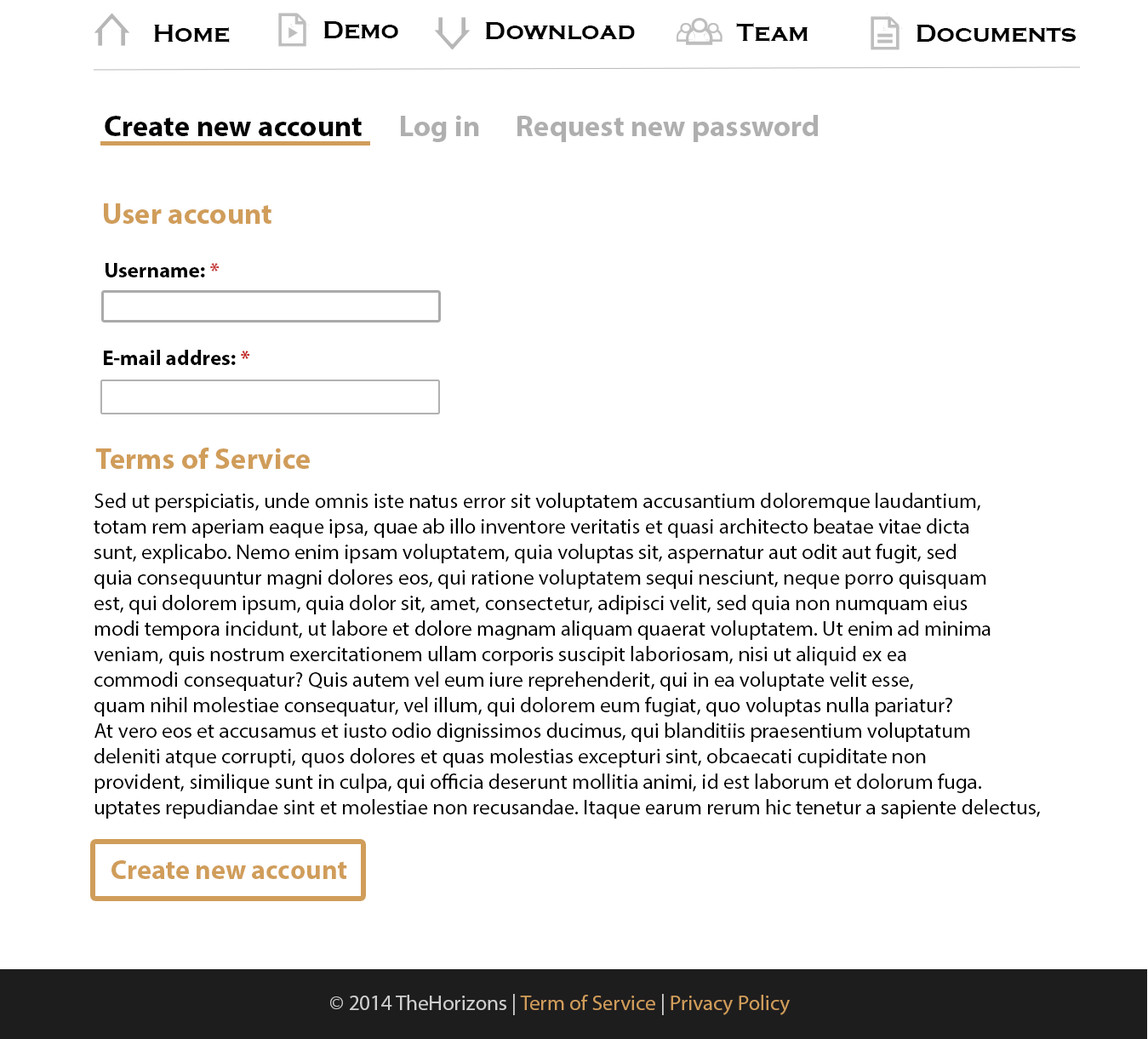
<style>
.page{position:relative;width:1148px;height:1039px;background:#ffffff}
.page>*{position:absolute;margin:0}
.t1{font:25.5px "CopperplateGothic-Bold";color:#000000}
.t2{font:29.8px "MyriadPro-Bold";color:#afafaf}
.t3{font:21.3px "MyriadPro-Regular";color:#000000}
.t4{font:29.8px "MyriadPro-Bold";color:#000000}
.t5{font:29.8px "MyriadPro-Bold";color:#d09d5a}
.t6{font:21.3px "MyriadPro-Bold";color:#000000}
.t7{font:21.3px "MyriadPro-Bold";color:#c83939}
.t8{font:21.3px "MyriadPro-Bold";color:#c32323}
.t9{font:27.2px "MyriadPro-Bold";color:#d09d5a}
.t10{font:21.3px "MyriadPro-Regular";color:#cecece}
.t11{font:21.3px "MyriadPro-Regular";color:#d09d5a}
</style>
<div class="page">
<p class="t1" style="left:154px;top:25px;width:76px;height:18px">Home</p>
<p class="t1" style="left:323px;top:21px;width:75px;height:18px">Demo</p>
<p class="t1" style="left:485px;top:22px;width:150px;height:18px">Download</p>
<p class="t1" style="left:736px;top:23px;width:72px;height:19px">Team</p>
<p class="t1" style="left:916px;top:25px;width:159px;height:18px">Documents</p>
<p class="t2" style="left:105px;top:115px;width:713px;height:27px"><span class="t3"><br>    </span><span class="t4">Create new account      </span>Log in      Request new password</p>
<p class="t5" style="left:104px;top:203px;width:167px;height:21px">User account</p>
<p class="t6" style="left:106px;top:263px;width:113px;height:14px">Username: <span class="t7">*</span></p>
<p class="t6" style="left:104px;top:350px;width:145px;height:15px">E-mail addres: <span class="t8">*</span></p>
<p class="t5" style="left:95px;top:448px;width:215px;height:21px">Terms of Service</p>
<p class="t3" style="left:94px;top:493px;width:946px;height:326px">Sed ut perspiciatis, unde omnis iste natus error sit voluptatem accusantium doloremque laudantium, <br>totam rem aperiam eaque ipsa, quae ab illo inventore veritatis et quasi architecto beatae vitae dicta <br>sunt, explicabo. Nemo enim ipsam voluptatem, quia voluptas sit, aspernatur aut odit aut fugit, sed <br>quia consequuntur magni dolores eos, qui ratione voluptatem sequi nesciunt, neque porro quisquam <br>est, qui dolorem ipsum, quia dolor sit, amet, consectetur, adipisci velit, sed quia non numquam eius <br>modi tempora incidunt, ut labore et dolore magnam aliquam quaerat voluptatem. Ut enim ad minima <br>veniam, quis nostrum exercitationem ullam corporis suscipit laboriosam, nisi ut aliquid ex ea <br>commodi consequatur? Quis autem vel eum iure reprehenderit, qui in ea voluptate velit esse, <br>quam nihil molestiae consequatur, vel illum, qui dolorem eum fugiat, quo voluptas nulla pariatur? <br>At vero eos et accusamus et iusto odio dignissimos ducimus, qui blanditiis praesentium voluptatum <br>deleniti atque corrupti, quos dolores et quas molestias excepturi sint, obcaecati cupiditate non <br>provident, similique sunt in culpa, qui officia deserunt mollitia animi, id est laborum et dolorum fuga. <br>uptates repudiandae sint et molestiae non recusandae. Itaque earum rerum hic tenetur a sapiente delectus,</p>
<p class="t9" style="left:111px;top:860px;width:236px;height:19px">Create new account</p>
<p class="t10" style="left:330px;top:994px;width:460px;height:21px">© 2014 TheHorizons | <span class="t11">Term of Service</span> | <span class="t11">Privacy Policy</span></p>
</div>
